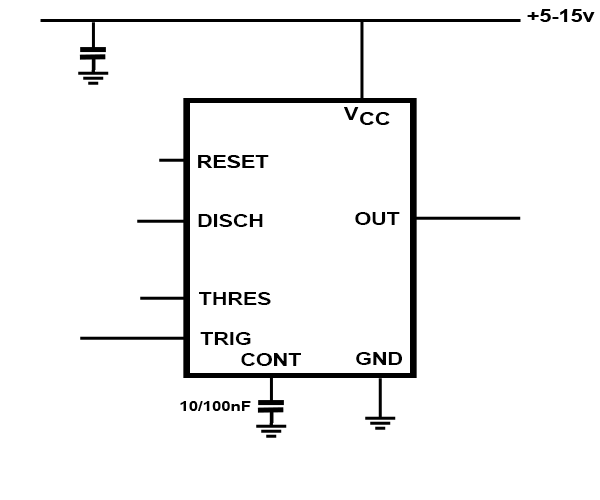
<style>
.page{position:relative;width:600px;height:500px;background:#ffffff}
.page>*{position:absolute;margin:0}
.t1{font:17.9px "Arial-BoldMT";color:#000000;scale:1.2 1}
.t2{font:13.9px "Arial-BoldMT";color:#000000;scale:1.2 1}
</style>
<div class="page">
<p class="t1" style="left:527px;top:9px;width:68px;height:13px">+5-15v</p>
<p class="t1" style="left:198px;top:214px;width:65px;height:13px">DISCH</p>
<p class="t1" style="left:355px;top:212px;width:45px;height:13px">OUT</p>
<p class="t1" style="left:199px;top:292px;width:72px;height:13px">THRES</p>
<p class="t1" style="left:200px;top:332px;width:51px;height:13px">TRIG</p>
<p class="t1" style="left:241px;top:353px;width:60px;height:13px">CONT</p>
<p class="t1" style="left:356px;top:352px;width:46px;height:13px">GND</p>
<p class="t2" style="left:180px;top:401px;width:71px;height:10px">10/100nF</p>
</div>
